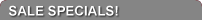
<style>
.page{position:relative;width:202px;height:20px;background:#858585}
.page>*{position:absolute;margin:0}
.t1{font:13.3px "Arial-BoldMT";color:#ffffff}
</style>
<div class="page">
<p class="t1" style="left:9px;top:5px;width:109px;height:11px">SALE SPECIALS!</p>
</div>
